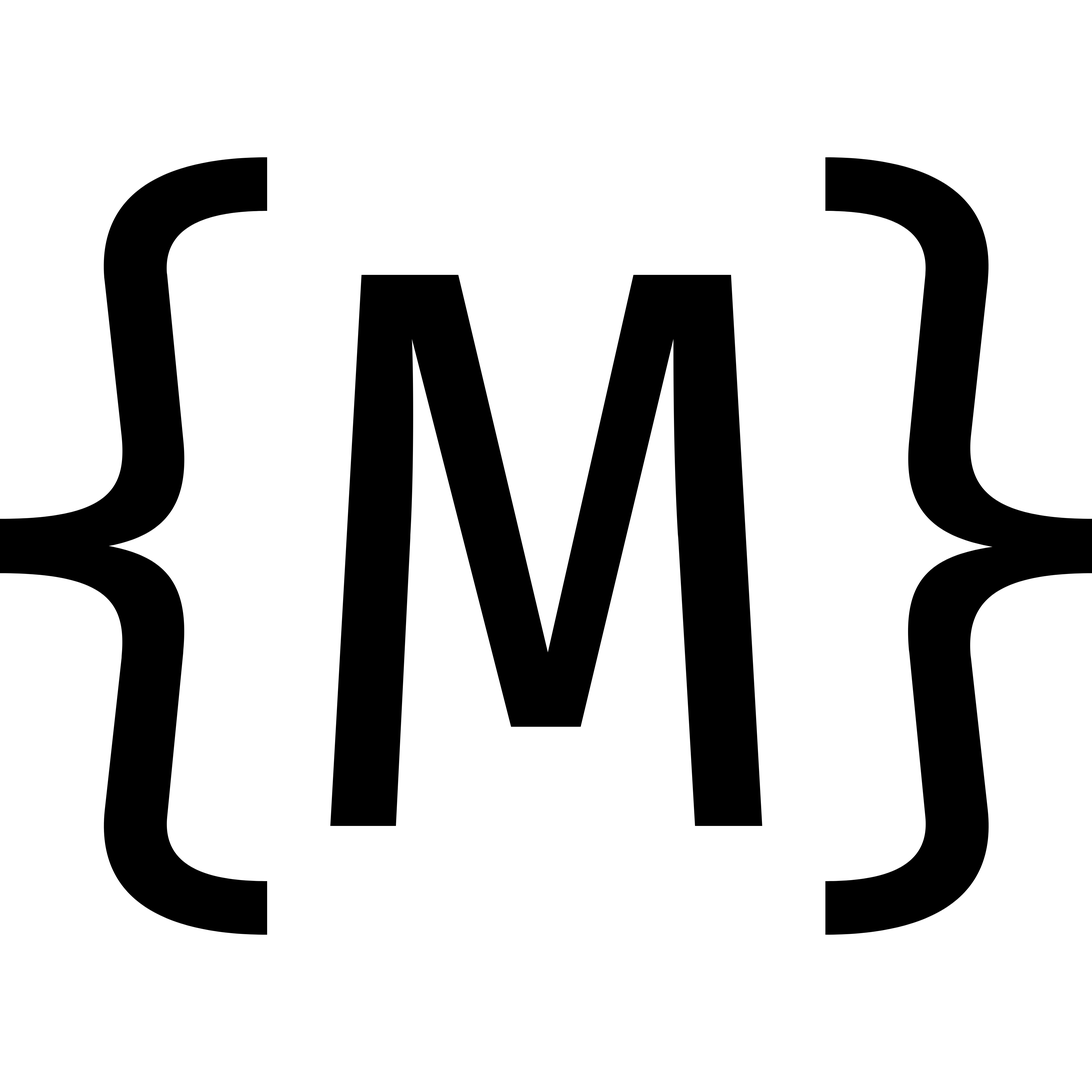
<style>
.page{position:relative;width:1092px;height:1092px;background:#ffffff}
.page>*{position:absolute;margin:0}
.t1{font:799.8px "FiraMono-Regular";letter-spacing:-0.1em;color:#000000}
</style>
<div class="page">
<p class="t1" style="left:0px;top:157px;width:1093px;height:778px">{M}</p>
</div>
